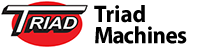
<style>
.page{position:relative;width:198px;height:48px;background:#ffffff}
.page>*{position:absolute;margin:0}
.t1{font:24px/21.3px "MyriadConceptRoman-Bold";color:#000000;scale:0.96 1}
.t2{font:24px/21.3px "MyriadConceptRoman-Bold";letter-spacing:-0.05em;color:#000000;scale:0.96 1}
.t3{font:24px/21.3px "MyriadConceptRoman-Bold";letter-spacing:-0.01em;color:#000000;scale:0.96 1}
.t4{font:24px/21.3px "MyriadConceptRoman-Bold";letter-spacing:-0.025em;color:#000000;scale:0.96 1}
</style>
<div class="page">
<p class="t1" style="left:94px;top:5px;width:93px;height:39px">Triad<br><span class="t2">Ma</span><span class="t3">ch</span><span class="t4">ines</span></p>
</div>
